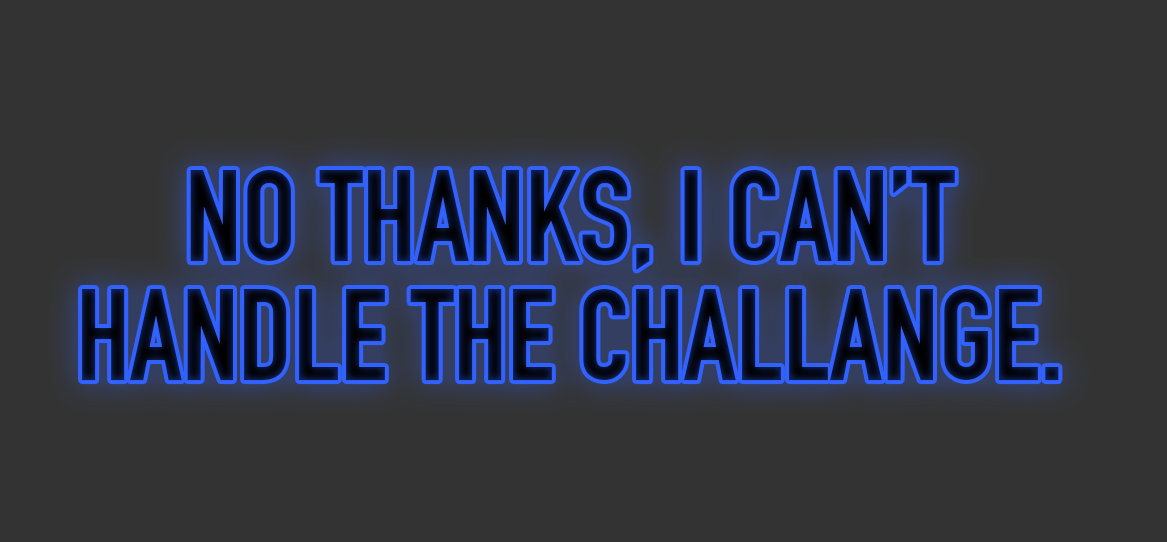
<style>
.page{position:relative;width:1167px;height:542px;background:#333333}
.page>*{position:absolute;margin:0}
.t1{font:127.5px/118.8px "DINEngschrift";text-transform:uppercase}
</style>
<div class="page">
<p class="t1" style="left:82px;top:170px;width:977px;height:211px;text-align:center">No thanks, I can’t <br>handle the challange.</p>
</div>
